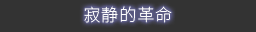
<style>
.page{position:relative;width:256px;height:32px;background:#333333}
.page>*{position:absolute;margin:0}
.t1{font:17px "NotoSansSC-Thin";letter-spacing:0.06em;color:#ffffff}
</style>
<div class="page">
<p class="t1" style="left:84px;top:6px;width:88px;height:17px">寂静的革命</p>
</div>
